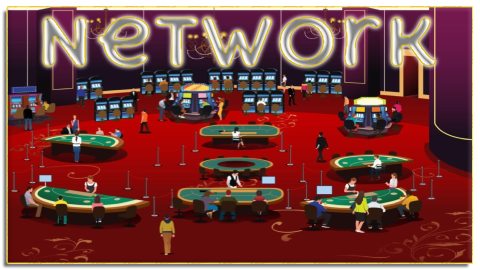
<style>
.page{position:relative;width:480px;height:270px}
.page>*{position:absolute;margin:0}
.t1{font:64.5px "DeliusUnicase-Bold";scale:1.21 1}
</style>
<div class="page">
<p class="t1" style="left:43px;top:16px;width:394px;height:51px">Network</p>
</div>
